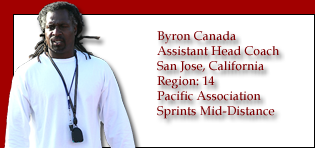
<style>
.page{position:relative;width:315px;height:148px;background:#ffffff}
.page>*{position:absolute;margin:0}
.t1{font:12.5px "BookAntiqua";color:#7b0002}
</style>
<div class="page">
<p class="t1" style="left:157px;top:31px;width:123px;height:88px">Byron Canada<br>Assistant Head Coach<br>San Jose, California<br>Region: 14<br>Pacific Association<br>Sprints Mid-Distance</p>
</div>
